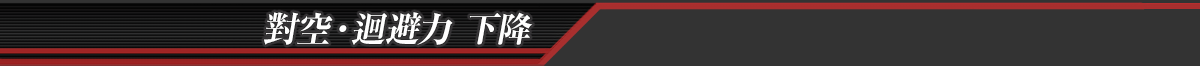
<style>
.page{position:relative;width:1200px;height:66px;background:#333333}
.page>*{position:absolute;margin:0}
.t1{font:35px "RyuminPro-ExBold";color:#ffffff;font-style:italic}
</style>
<div class="page">
<p class="t1" style="left:264px;top:12px;width:269px;height:33px">對空·迴避力 下降</p>
</div>
